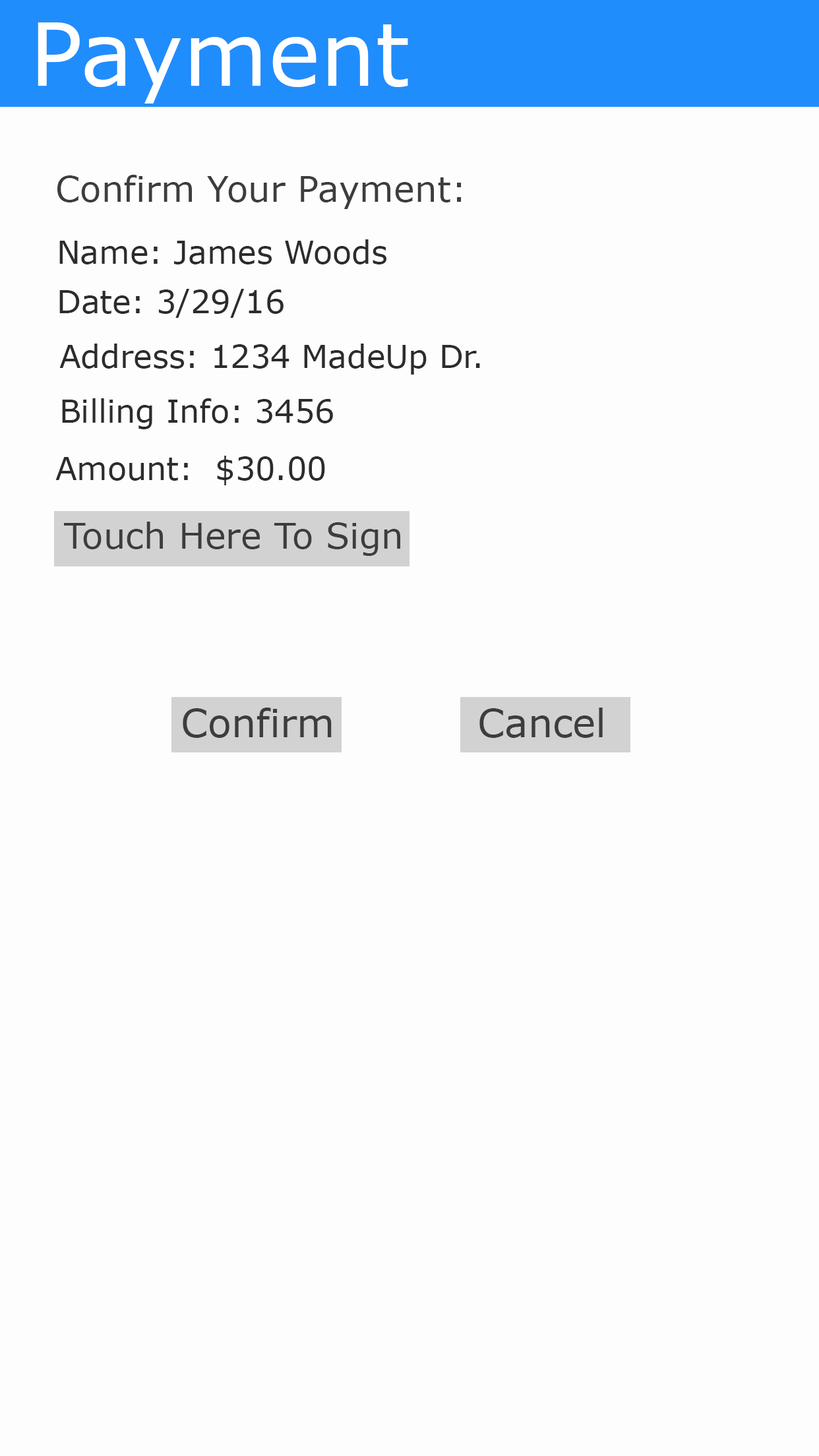
<style>
.page{position:relative;width:819px;height:1456px;background:#fdfdfd}
.page>*{position:absolute;margin:0}
.t1{font:87.2px "MSReferenceSansSerif";color:#ffffff}
.t2{font:35.2px "MSReferenceSansSerif";color:#3e3c3c}
.t3{font:31.5px "MSReferenceSansSerif";color:#2c2c2c}
.t4{font:38.7px "MSReferenceSansSerif";color:#3d3d3d}
</style>
<div class="page">
<p class="t1" style="left:38px;top:22px;width:370px;height:82px">Payment</p>
<p class="t2" style="left:57px;top:175px;width:405px;height:34px">Confirm Your Payment:</p>
<p class="t3" style="left:59px;top:239px;width:327px;height:25px">Name: James Woods</p>
<p class="t3" style="left:59px;top:289px;width:225px;height:29px">Date: 3/29/16</p>
<p class="t3" style="left:59px;top:344px;width:421px;height:31px">Address: 1234 MadeUp Dr.</p>
<p class="t3" style="left:62px;top:398px;width:271px;height:31px">Billing Info: 3456</p>
<p class="t3" style="left:55px;top:456px;width:270px;height:29px">Amount:  $30.00</p>
<p class="t2" style="left:64px;top:522px;width:336px;height:34px">Touch Here To Sign</p>
<p class="t4" style="left:183px;top:708px;width:149px;height:30px">Confirm</p>
<p class="t4" style="left:479px;top:708px;width:124px;height:30px">Cancel</p>
</div>
